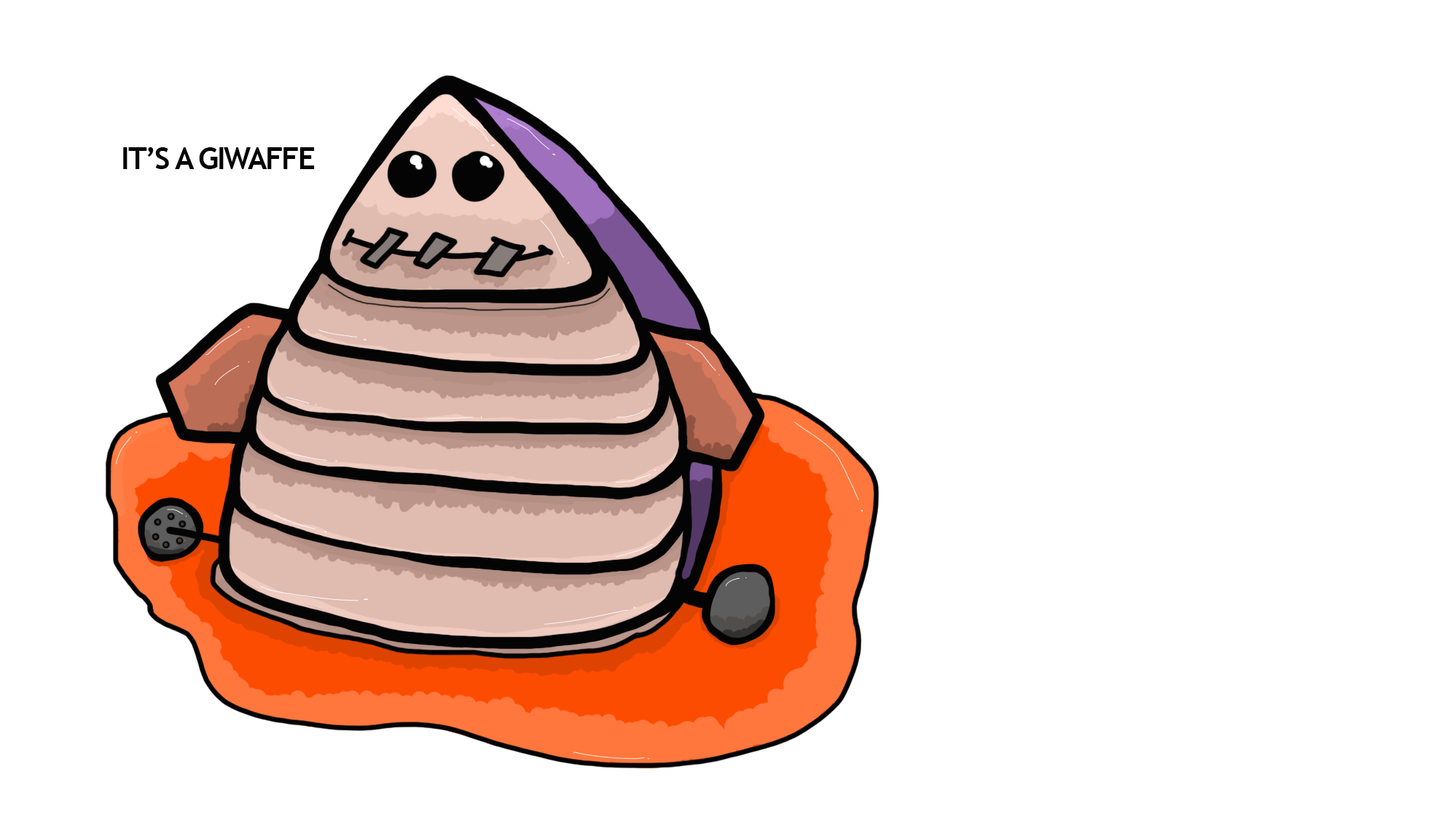
<style>
.page{position:relative;width:1450px;height:823px;background:#ffffff}
.page>*{position:absolute;margin:0}
.t1{font:30.4px "TrebuchetMS-Bold";letter-spacing:-0.05em;color:#040404;text-transform:uppercase}
</style>
<div class="page">
<p class="t1" style="left:123px;top:147px;width:192px;height:22px">It’s a giwaffe</p>
</div>
